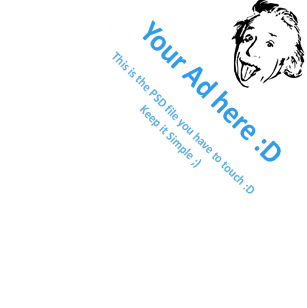
<style>
.page{position:relative;width:307px;height:308px;background:#ffffff}
.page>*{position:absolute;margin:0}
.t1{font:31.2px "Calibri-Bold";color:#2f9cec;scale:0.92 1}
.t2{font:13px/18px "Calibri-Bold";color:#5fafea;scale:0.92 1}
</style>
<div class="page">
<p class="t1" style="left:142px;top:20px;width:139px;height:142px;rotate:45deg">Your Ad here :D</p>
<p class="t2" style="left:112px;top:51px;width:143px;height:143px;text-align:center;rotate:45deg">This is the PSD file you have to touch :D<br>Keep it Simple ;)</p>
</div>
